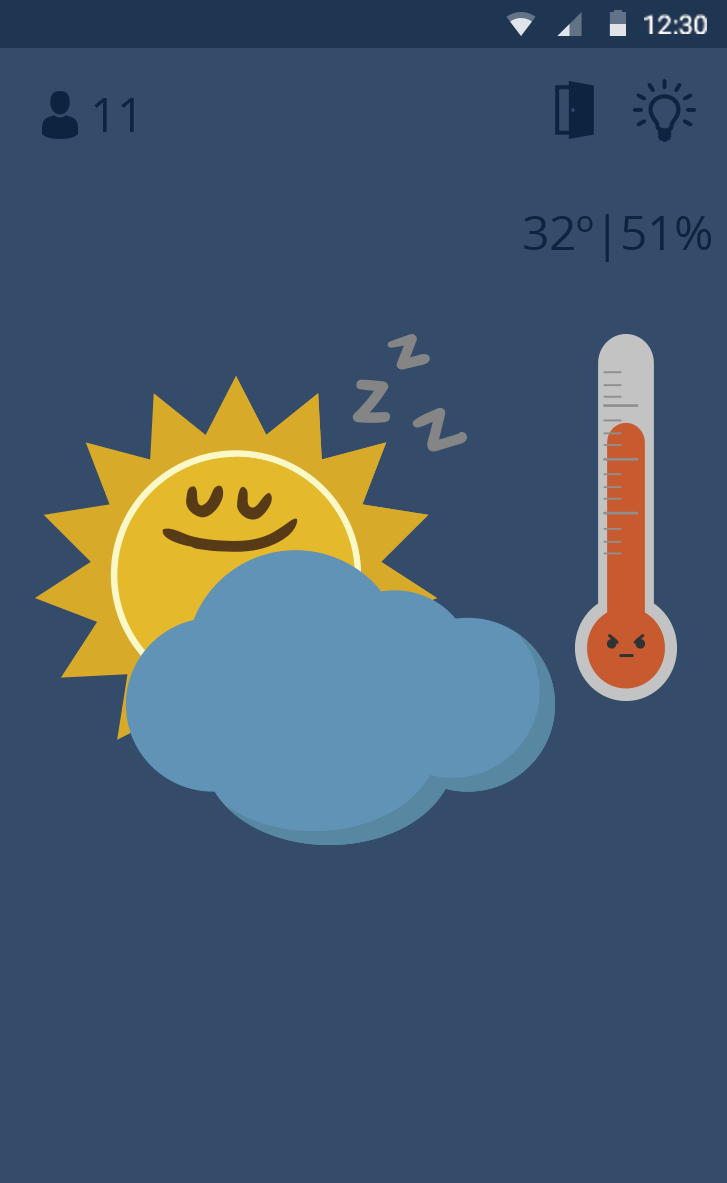
<style>
.page{position:relative;width:727px;height:1183px;background:#344c6a}
.page>*{position:absolute;margin:0}
.t1{font:26px "Roboto-Regular";color:#ffffff}
.t2{font:48px "OpenSans";color:#0d2440}
</style>
<div class="page">
<p class="t1" style="left:644px;top:14px;width:63px;height:20px">12:30</p>
<p class="t2" style="left:94px;top:98px;width:40px;height:34px">11</p>
<p class="t2" style="left:524px;top:214px;width:187px;height:48px">32º|51%</p>
</div>
